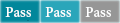
<style>
.page{position:relative;width:120px;height:23px}
.page>*{position:absolute;margin:0}
.t1{font:21px "AdobeArabic-Regular";color:#ffffff}
</style>
<div class="page">
<p class="t1" style="left:5px;top:7px;width:26px;height:10px">Pass</p>
<p class="t1" style="left:45px;top:7px;width:26px;height:10px">Pass</p>
<p class="t1" style="left:85px;top:7px;width:26px;height:10px">Pass</p>
</div>
